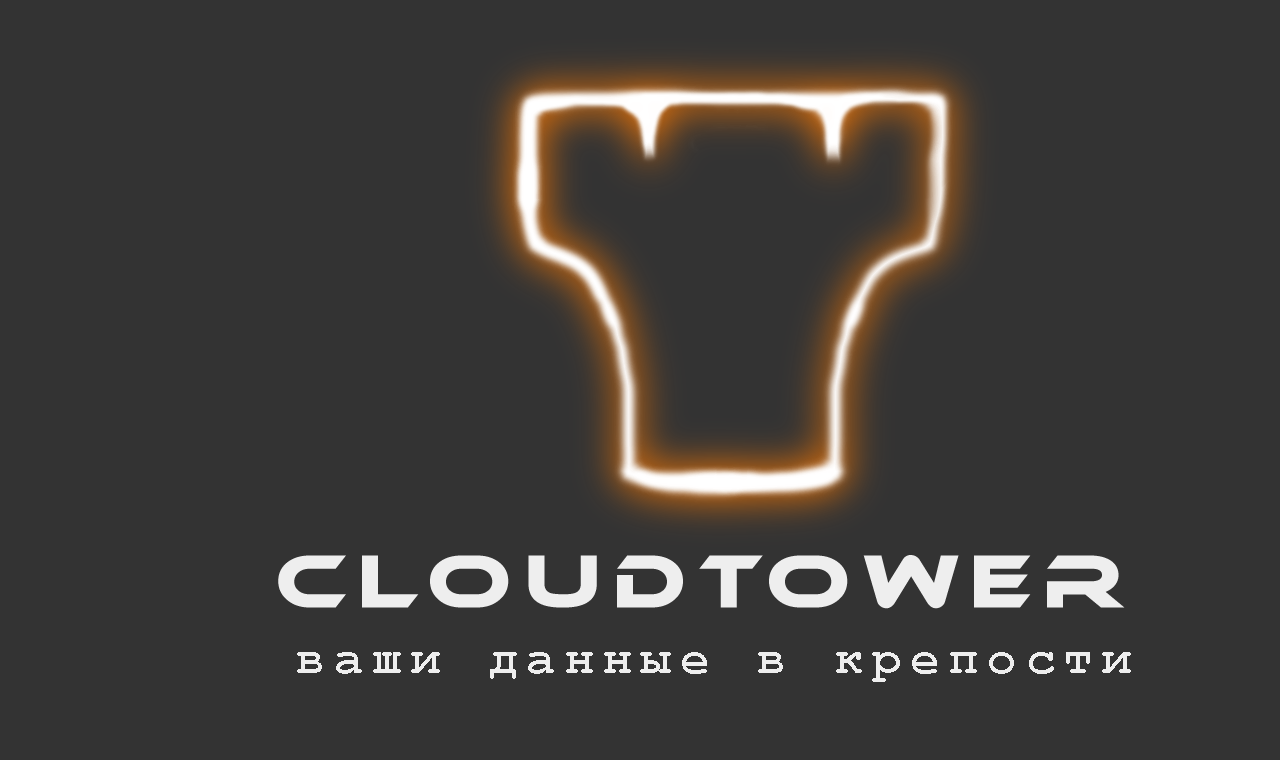
<style>
.page{position:relative;width:1280px;height:760px;background:#333333}
.page>*{position:absolute;margin:0}
.t1{font:72px "Ethnocentric";letter-spacing:0.2em;color:#eeeeee}
.t2{font:48px "CourierNewPS-BoldMT";letter-spacing:0.2em;color:#eeeeee}
</style>
<div class="page">
<p class="t1" style="left:278px;top:555px;width:847px;height:54px">CLOUDTOWER</p>
<p class="t2" style="left:297px;top:652px;width:834px;height:30px">ваши данные в крепости</p>
</div>
